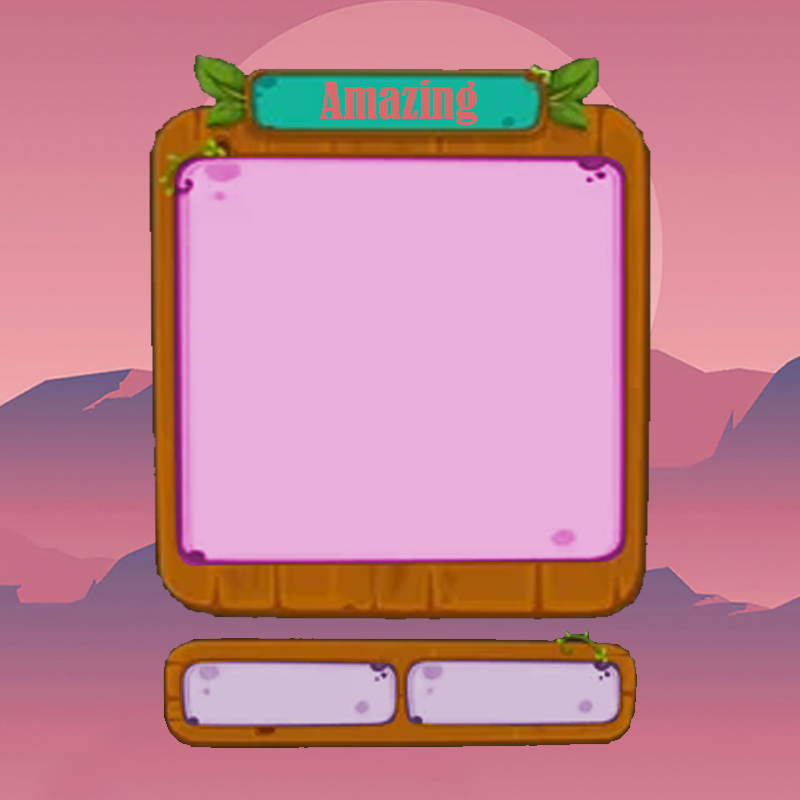
<style>
.page{position:relative;width:800px;height:800px;background:#eaafdd}
.page>*{position:absolute;margin:0}
.t1{font:48px "BernardMT-Condensed";color:#da6868}
</style>
<div class="page">
<p class="t1" style="left:320px;top:80px;width:158px;height:45px">Amazing</p>
</div>
